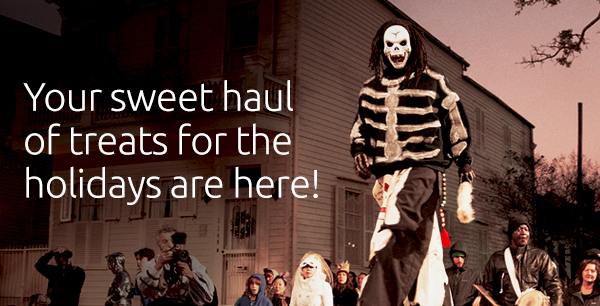
<style>
.page{position:relative;width:600px;height:306px}
.page>*{position:absolute;margin:0}
.t1{font:39.8px/43.4px "Ubuntu-Light";letter-spacing:-0.02em;color:#ffffff}
</style>
<div class="page">
<p class="t1" style="left:23px;top:80px;width:295px;height:125px">Your sweet haul <br>of treats for the holidays are here!</p>
</div>
